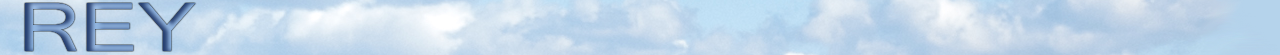
<style>
.page{position:relative;width:1280px;height:55px}
.page>*{position:absolute;margin:0}
.t1{font:72.1px "Gautami";scale:1.3 1}
</style>
<div class="page">
<p class="t1" style="left:24px;top:3px;width:172px;height:48px">REY</p>
</div>
